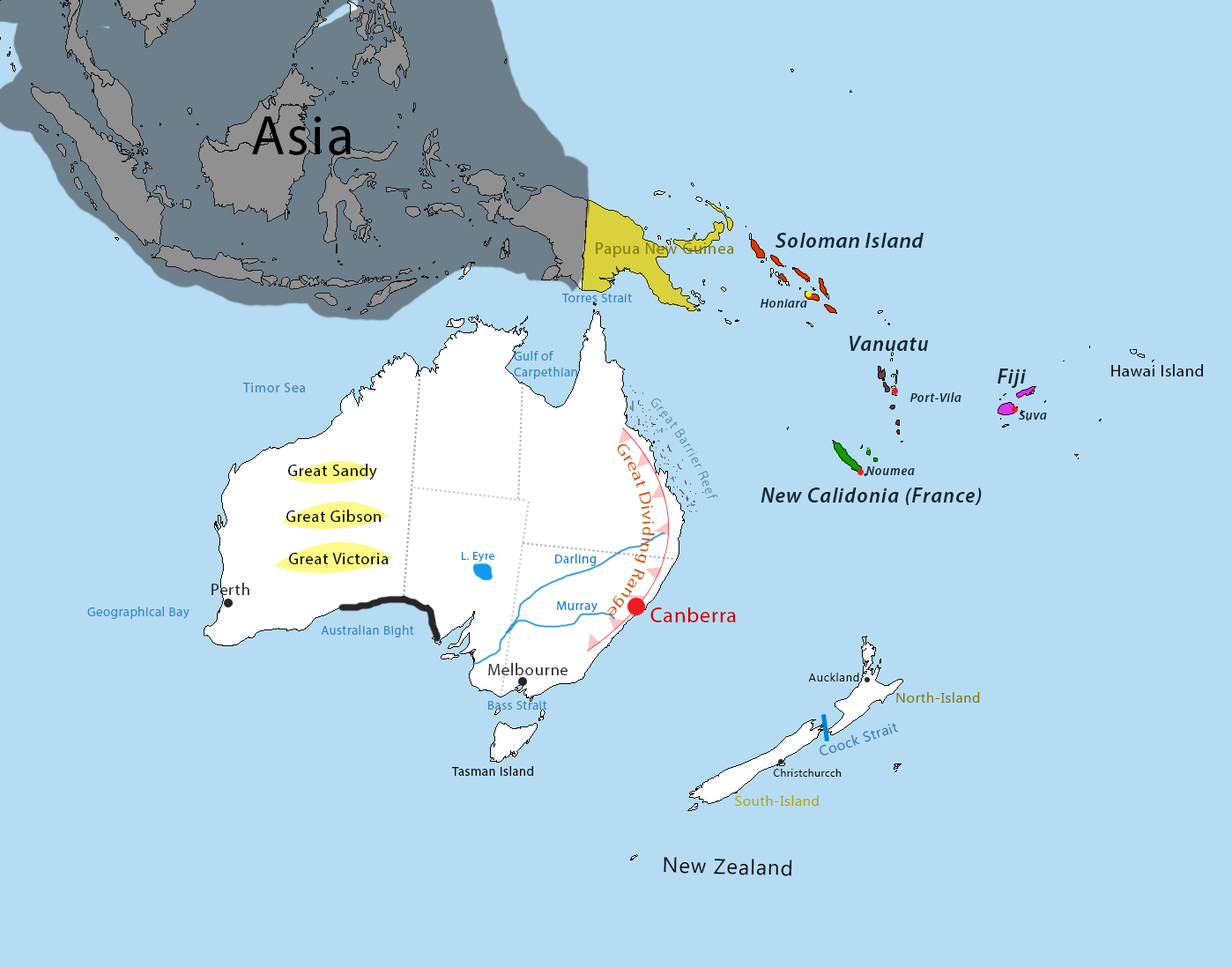
<style>
.page{position:relative;width:1232px;height:968px;background:#b6dcf4}
.page>*{position:absolute;margin:0}
.t1{font:56.4px "MyriadPro-Regular";letter-spacing:0.04em;color:#000000}
.t2{font:21.2px "MyriadPro-SemiboldIt";letter-spacing:0.04em;color:#0c2331}
.t3{font:16.5px "MyriadPro-Regular";letter-spacing:0.04em;color:#817b00}
.t4{font:12.9px "MyriadPro-Regular";letter-spacing:0.04em;color:#3089c1}
.t5{font:12.9px "MyriadPro-SemiboldIt";letter-spacing:0.04em;color:#0c2331}
.t6{font:16.5px "MyriadPro-Regular";letter-spacing:0.04em;color:#0b0b04}
.t7{font:14.1px "MyriadPro-Regular";letter-spacing:0.04em;color:#4089b7}
.t8{font:10.6px "MyriadPro-Regular";letter-spacing:0.04em;color:#4089b7}
.t9{font:16.4px "MyriadPro-Regular";letter-spacing:0.04em;color:#d05d09}
.t10{font:16.5px "MyriadPro-Regular";letter-spacing:0.04em;color:#000000}
.t11{font:11.4px "MyriadPro-Regular";letter-spacing:0.04em;color:#0984d0}
.t12{font:12.9px "MyriadPro-Regular";letter-spacing:0.04em;color:#0081d1}
.t13{font:16.5px "MyriadPro-Regular";letter-spacing:0.04em;color:#2e2e2e}
.t14{font:21.2px "MyriadPro-Regular";letter-spacing:0.04em;color:#cc0000}
.t15{font:11.8px "MicrosoftNewTaiLue";letter-spacing:0.04em;color:#0b0b04}
.t16{font:12.9px "MyriadPro-Regular";letter-spacing:0.04em;color:#4089b7}
.t17{font:14.1px "MicrosoftNewTaiLue";letter-spacing:0.04em;color:#7f7900}
.t18{font:14.1px "MicrosoftNewTaiLue";letter-spacing:0.04em;color:#287eb4}
.t19{font:12.9px "MyriadPro-Regular";letter-spacing:0.04em;color:#06080a}
.t20{font:10.6px "MicrosoftNewTaiLue";letter-spacing:0.04em;color:#0b0b04}
.t21{font:14.1px "MicrosoftNewTaiLue";letter-spacing:0.04em;color:#afa700}
.t22{font:21.2px "MicrosoftNewTaiLue";letter-spacing:0.04em;color:#0b0b04}
</style>
<div class="page">
<p class="t1" style="left:252px;top:116px;width:99px;height:39px">Asia</p>
<p class="t2" style="left:776px;top:233px;width:148px;height:15px">Soloman Island</p>
<p class="t3" style="left:596px;top:242px;width:137px;height:15px">Papua New Guinea</p>
<p class="t4" style="left:562px;top:293px;width:70px;height:9px">Torres Strait</p>
<p class="t5" style="left:761px;top:299px;width:46px;height:9px">Honiara</p>
<p class="t2" style="left:850px;top:336px;width:78px;height:15px">Vanuatu</p>
<p class="t4" style="left:514px;top:351px;width:63px;height:28px">Gulf of <br>Carpethian</p>
<p class="t6" style="left:1111px;top:364px;width:92px;height:12px">Hawai Island</p>
<p class="t2" style="left:998px;top:368px;width:28px;height:20px">Fiji</p>
<p class="t7" style="left:242px;top:383px;width:64px;height:9px">Timor Sea</p>
<p class="t8" style="left:650px;top:398px;width:68px;height:101px;rotate:59deg">Great Barrier Reef</p>
<p class="t5" style="left:910px;top:392px;width:52px;height:10px">Port-Vila</p>
<p class="t5" style="left:1019px;top:411px;width:28px;height:9px">Suva</p>
<p class="t9" style="left:606px;top:443px;width:49px;height:173px;rotate:93deg">Great Dividing Range</p>
<p class="t10" style="left:288px;top:464px;width:89px;height:16px">Great Sandy</p>
<p class="t5" style="left:866px;top:466px;width:49px;height:9px">Noumea</p>
<p class="t2" style="left:761px;top:487px;width:221px;height:18px">New Calidonia (France)</p>
<p class="t10" style="left:286px;top:509px;width:95px;height:13px">Great Gibson</p>
<p class="t10" style="left:289px;top:553px;width:99px;height:11px">Great Victoria</p>
<p class="t11" style="left:462px;top:552px;width:32px;height:10px">L. Eyre</p>
<p class="t12" style="left:555px;top:554px;width:41px;height:12px">Darling</p>
<p class="t13" style="left:212px;top:583px;width:37px;height:12px">Perth</p>
<p class="t12" style="left:557px;top:601px;width:41px;height:12px">Murray</p>
<p class="t4" style="left:87px;top:606px;width:102px;height:13px">Geographical Bay</p>
<p class="t14" style="left:650px;top:607px;width:86px;height:15px">Canberra</p>
<p class="t4" style="left:321px;top:625px;width:93px;height:12px">Australian Bight</p>
<p class="t13" style="left:488px;top:663px;width:80px;height:12px">Melbourne</p>
<p class="t15" style="left:808px;top:672px;width:51px;height:9px">Auckland</p>
<p class="t16" style="left:488px;top:701px;width:59px;height:9px">Bass Strait</p>
<p class="t17" style="left:896px;top:692px;width:84px;height:10px">North-Island</p>
<p class="t18" style="left:820px;top:723px;width:79px;height:32px;rotate:-18deg">Coock Strait</p>
<p class="t19" style="left:452px;top:766px;width:81px;height:10px">Tasman Island</p>
<p class="t20" style="left:774px;top:769px;width:68px;height:7px">Christchurcch</p>
<p class="t21" style="left:735px;top:795px;width:84px;height:11px">South-Island</p>
<p class="t22" style="left:664px;top:857px;width:128px;height:19px;rotate:1deg">New Zealand</p>
</div>
